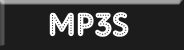
<style>
.page{position:relative;width:184px;height:50px;background:#1c1c1c}
.page>*{position:absolute;margin:0}
.t1{font:33.3px "AdamGorry-Lights";color:#ffffff}
</style>
<div class="page">
<p class="t1" style="left:49px;top:12px;width:80px;height:25px">Mp3s</p>
</div>
